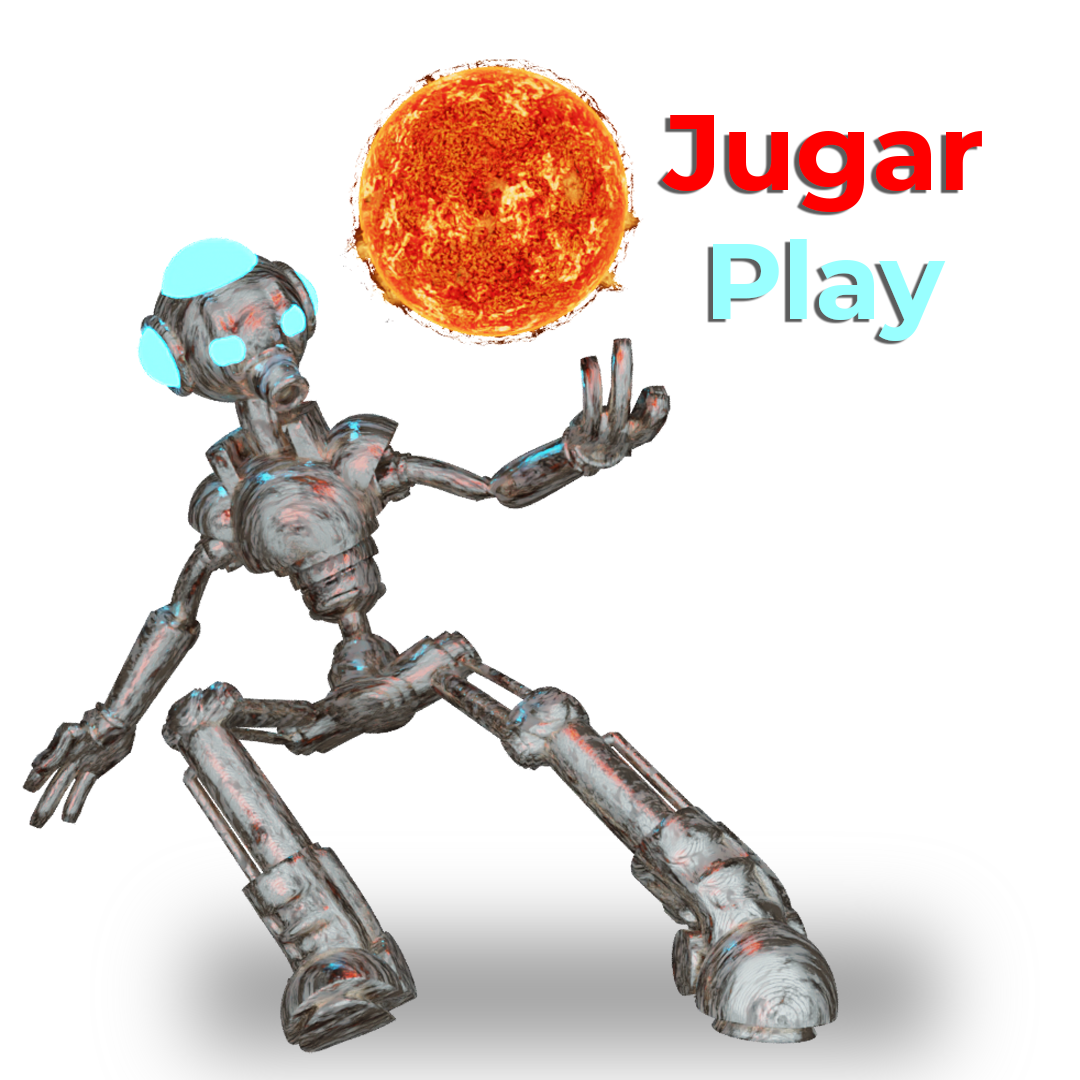
<style>
.page{position:relative;width:1080px;height:1080px;background:#ffffff}
.page>*{position:absolute;margin:0}
.t1{font:107.7px "Montserrat-Bold";color:#ff0000}
.t2{font:107.7px "Montserrat-Bold";color:#99ffff}
</style>
<div class="page">
<p class="t1" style="left:662px;top:115px;width:320px;height:226px;text-align:center">Jugar<br><span class="t2">Play</span></p>
</div>
